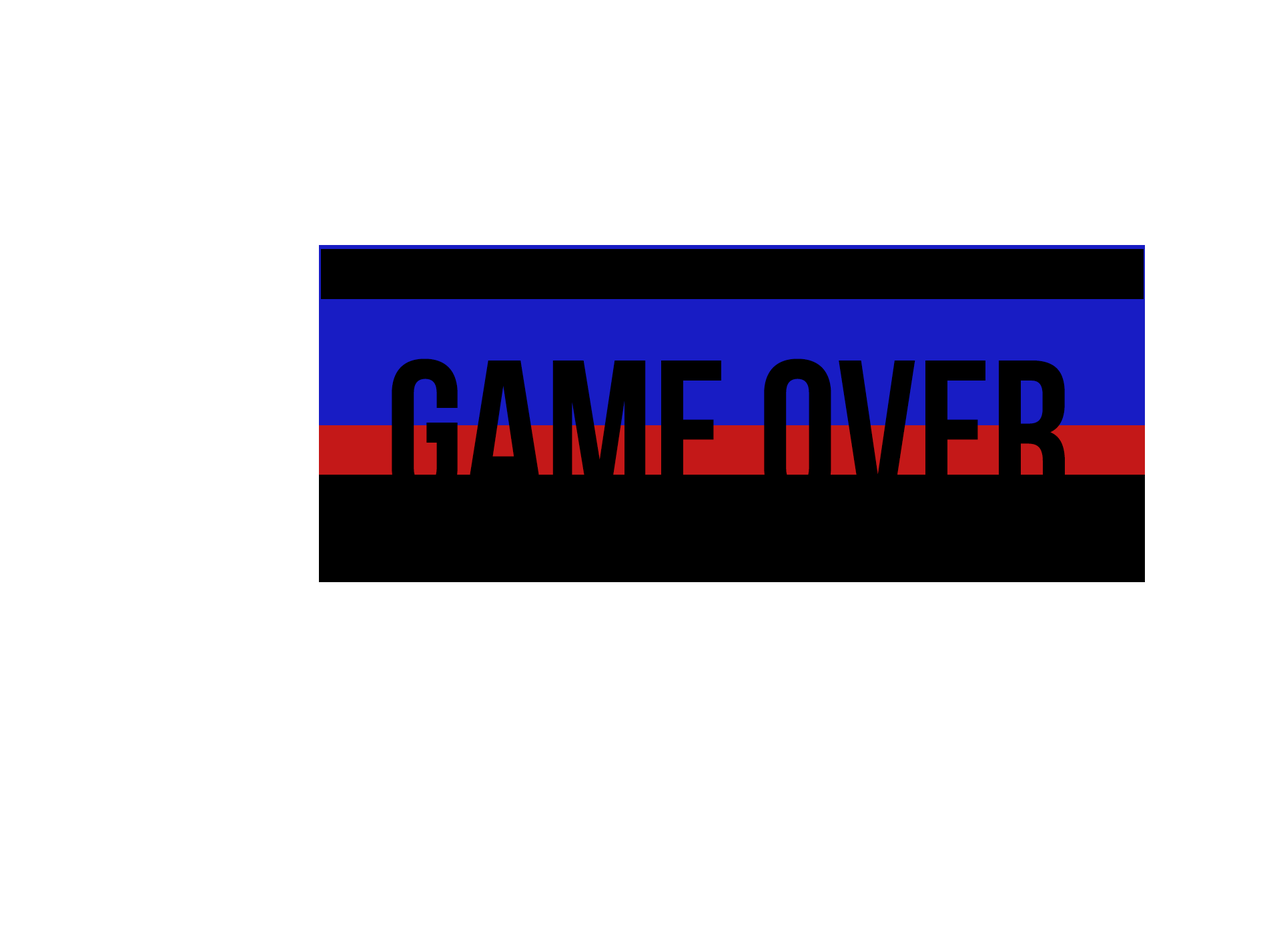
<style>
.page{position:relative;width:1261px;height:946px;background:#ffffff}
.page>*{position:absolute;margin:0}
.t1{font:200.2px "BebasNeueBold";color:#000000}
</style>
<div class="page">
<p class="t1" style="left:392px;top:358px;width:676px;height:144px">game over</p>
</div>
